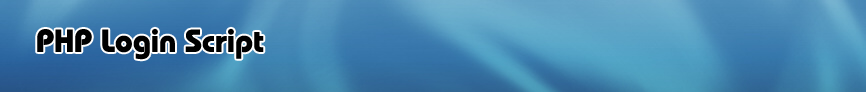
<style>
.page{position:relative;width:866px;height:92px}
.page>*{position:absolute;margin:0}
.t1{font:32px "00222";color:#000000}
</style>
<div class="page">
<p class="t1" style="left:37px;top:28px;width:227px;height:32px">PHP Login Script</p>
</div>
